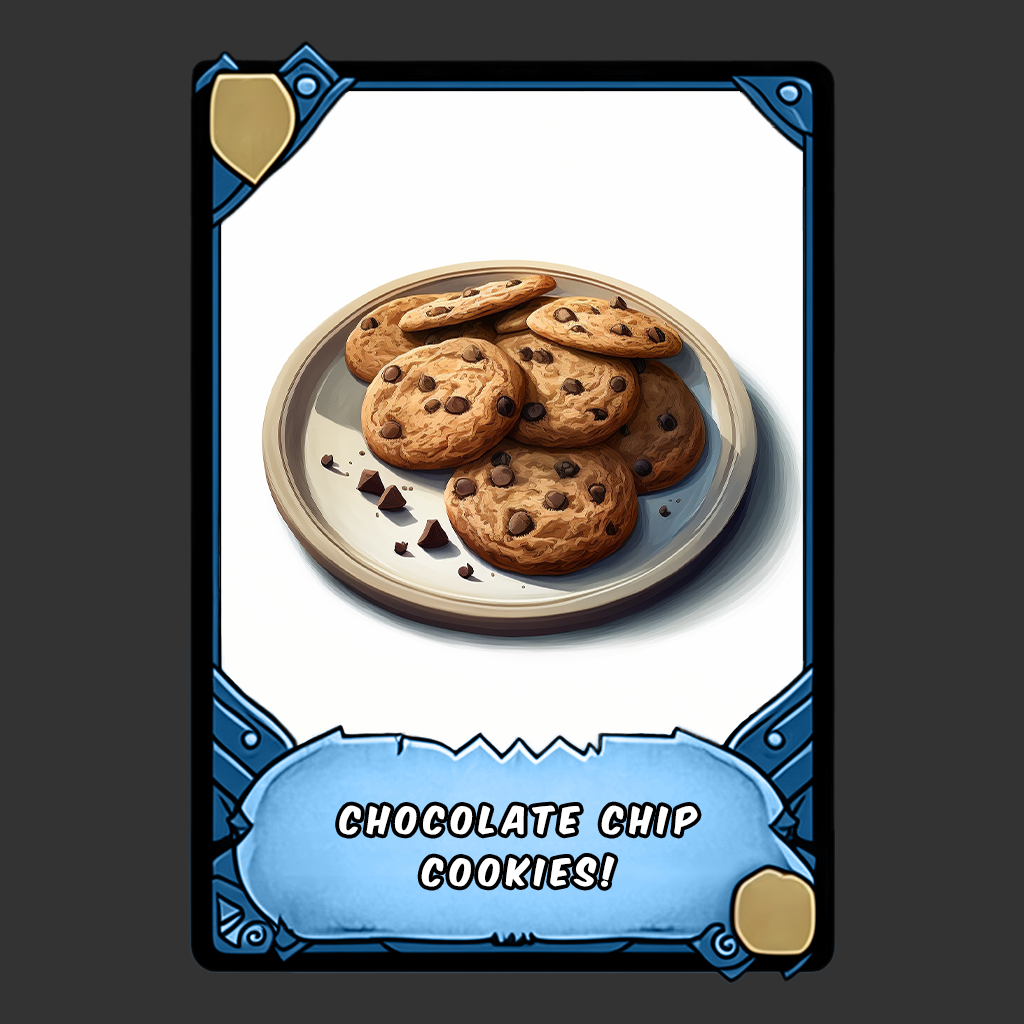
<style>
.page{position:relative;width:1024px;height:1024px;background:#333333}
.page>*{position:absolute;margin:0}
.t1{font:32px/52px "KomikaAxis";letter-spacing:0.2em;color:#ffffff}
</style>
<div class="page">
<p class="t1" style="left:339px;top:805px;width:359px;height:82px;text-align:center">chocolate chip cookies!</p>
</div>
